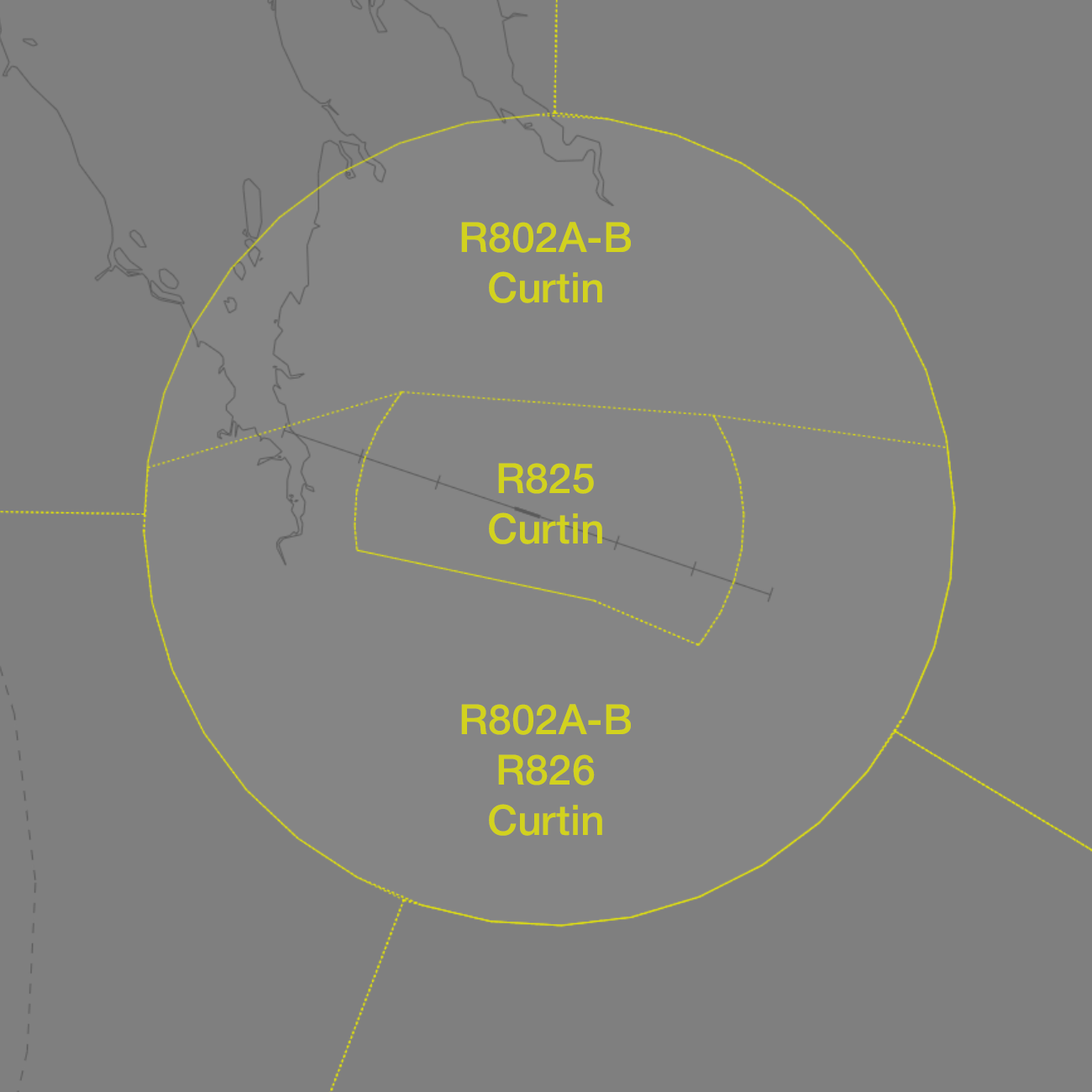
<style>
.page{position:relative;width:1092px;height:1092px;background:#7f7f7f}
.page>*{position:absolute;margin:0}
.t1{font:42px "HelveticaNeue-Medium";color:#d2d21e}
</style>
<div class="page">
<p class="t1" style="left:461px;top:222px;width:170px;height:81px;text-align:center">R802A-B<br>Curtin</p>
<p class="t1" style="left:489px;top:463px;width:113px;height:81px;text-align:center">R825<br>Curtin</p>
<p class="t1" style="left:461px;top:704px;width:170px;height:132px;text-align:center">R802A-B<br>R826<br>Curtin</p>
</div>
